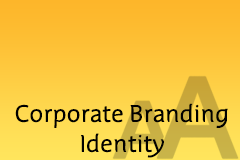
<style>
.page{position:relative;width:240px;height:160px}
.page>*{position:absolute;margin:0}
.t1{font:24.9px "EdificeClassic";color:#000000}
</style>
<div class="page">
<p class="t1" style="left:15px;top:103px;width:213px;height:55px;text-align:center">Corporate Branding<br>Identity</p>
</div>
